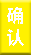
<style>
.page{position:relative;width:31px;height:55px;background:#fff100}
.page>*{position:absolute;margin:0}
.t1{font:16.7px/21.7px "MicrosoftYaHei-Bold";color:#ffffff}
</style>
<div class="page">
<p class="t1" style="left:7px;top:7px;width:17px;height:39px;text-align:center">确<br>认</p>
</div>
